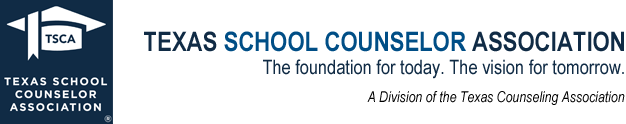
<style>
.page{position:relative;width:626px;height:124px;background:#ffffff}
.page>*{position:absolute;margin:0}
.t1{font:27px "ArialNarrow-Bold";color:#004e86}
.t2{font:27px "ArialNarrow-Bold";color:#102b45}
.t3{font:20px "ArialNarrow";color:#102b45}
.t4{font:15px "ArialNarrow-Italic";color:#000000}
</style>
<div class="page">
<p class="t1" style="left:144px;top:31px;width:480px;height:21px"><span class="t2">TEXAS </span>SCHOOL COUNSELOR<span class="t2"> ASSOCIATION</span></p>
<p class="t3" style="left:263px;top:59px;width:361px;height:20px">The foundation for today. The vision for tomorrow.</p>
<p class="t4" style="left:367px;top:91px;width:258px;height:14px">A Division of the Texas Counseling Association</p>
</div>
